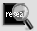
<style>
.page{position:relative;width:37px;height:31px;background:#e0e0e0}
.page>*{position:absolute;margin:0}
.t1{font:9px "LucidaGrande";letter-spacing:-0.13em}
</style>
<div class="page">
<p class="t1" style="left:6px;top:10px;width:33px;height:7px">researchr</p>
</div>
